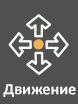
<style>
.page{position:relative;width:78px;height:104px;background:#505050}
.page>*{position:absolute;margin:0}
.t1{font:12px "Calibri-Bold";color:#ffffff}
</style>
<div class="page">
<p class="t1" style="left:3px;top:84px;width:73px;height:13px">Движение</p>
</div>
